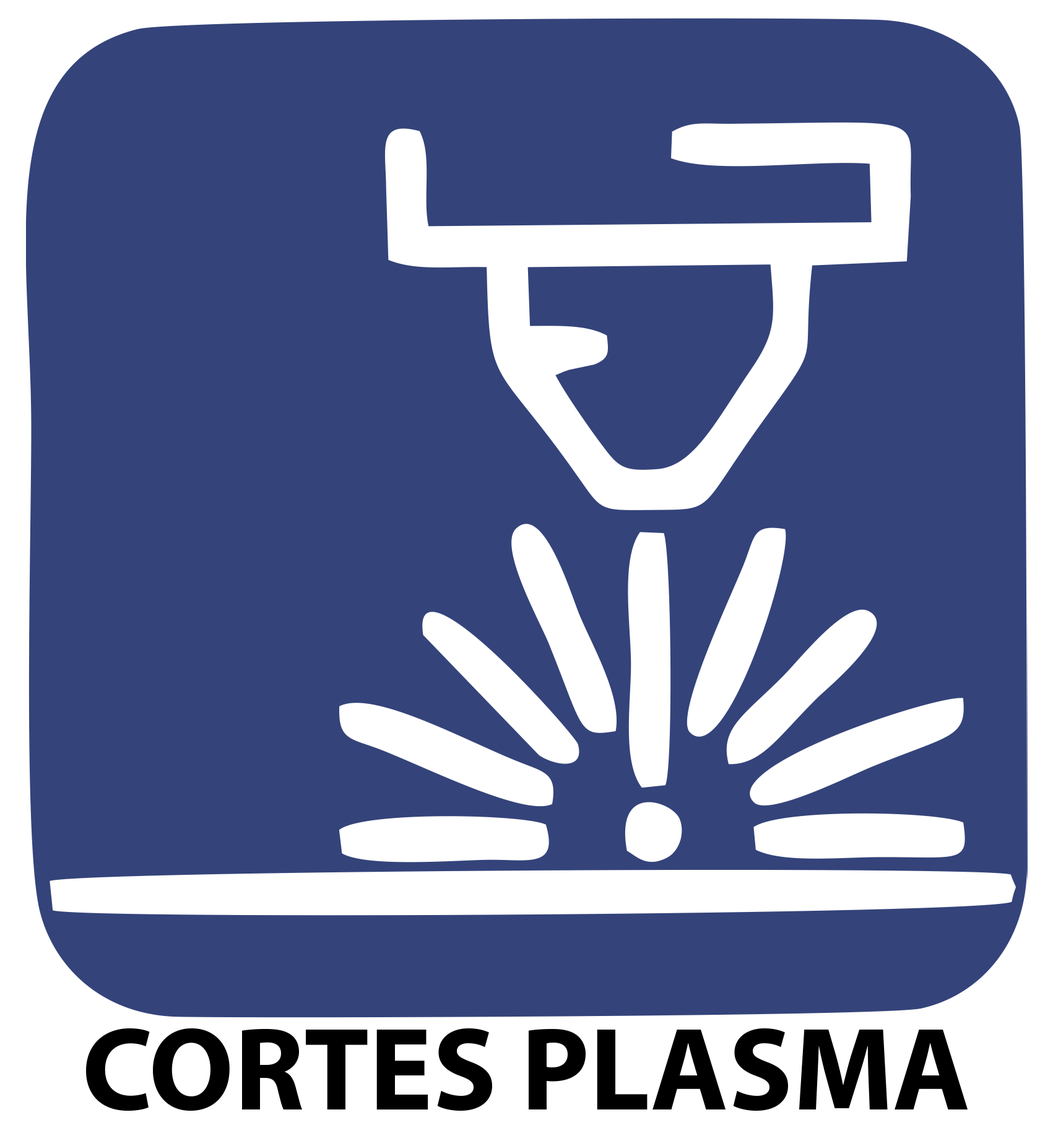
<style>
.page{position:relative;width:1053px;height:1133px;background:#34437a}
.page>*{position:absolute;margin:0}
.t1{font:118.6px "MyriadPro-Bold";color:#000000}
</style>
<div class="page">
<p class="t1" style="left:86px;top:1027px;width:881px;height:84px">CORTES PLASMA</p>
</div>
